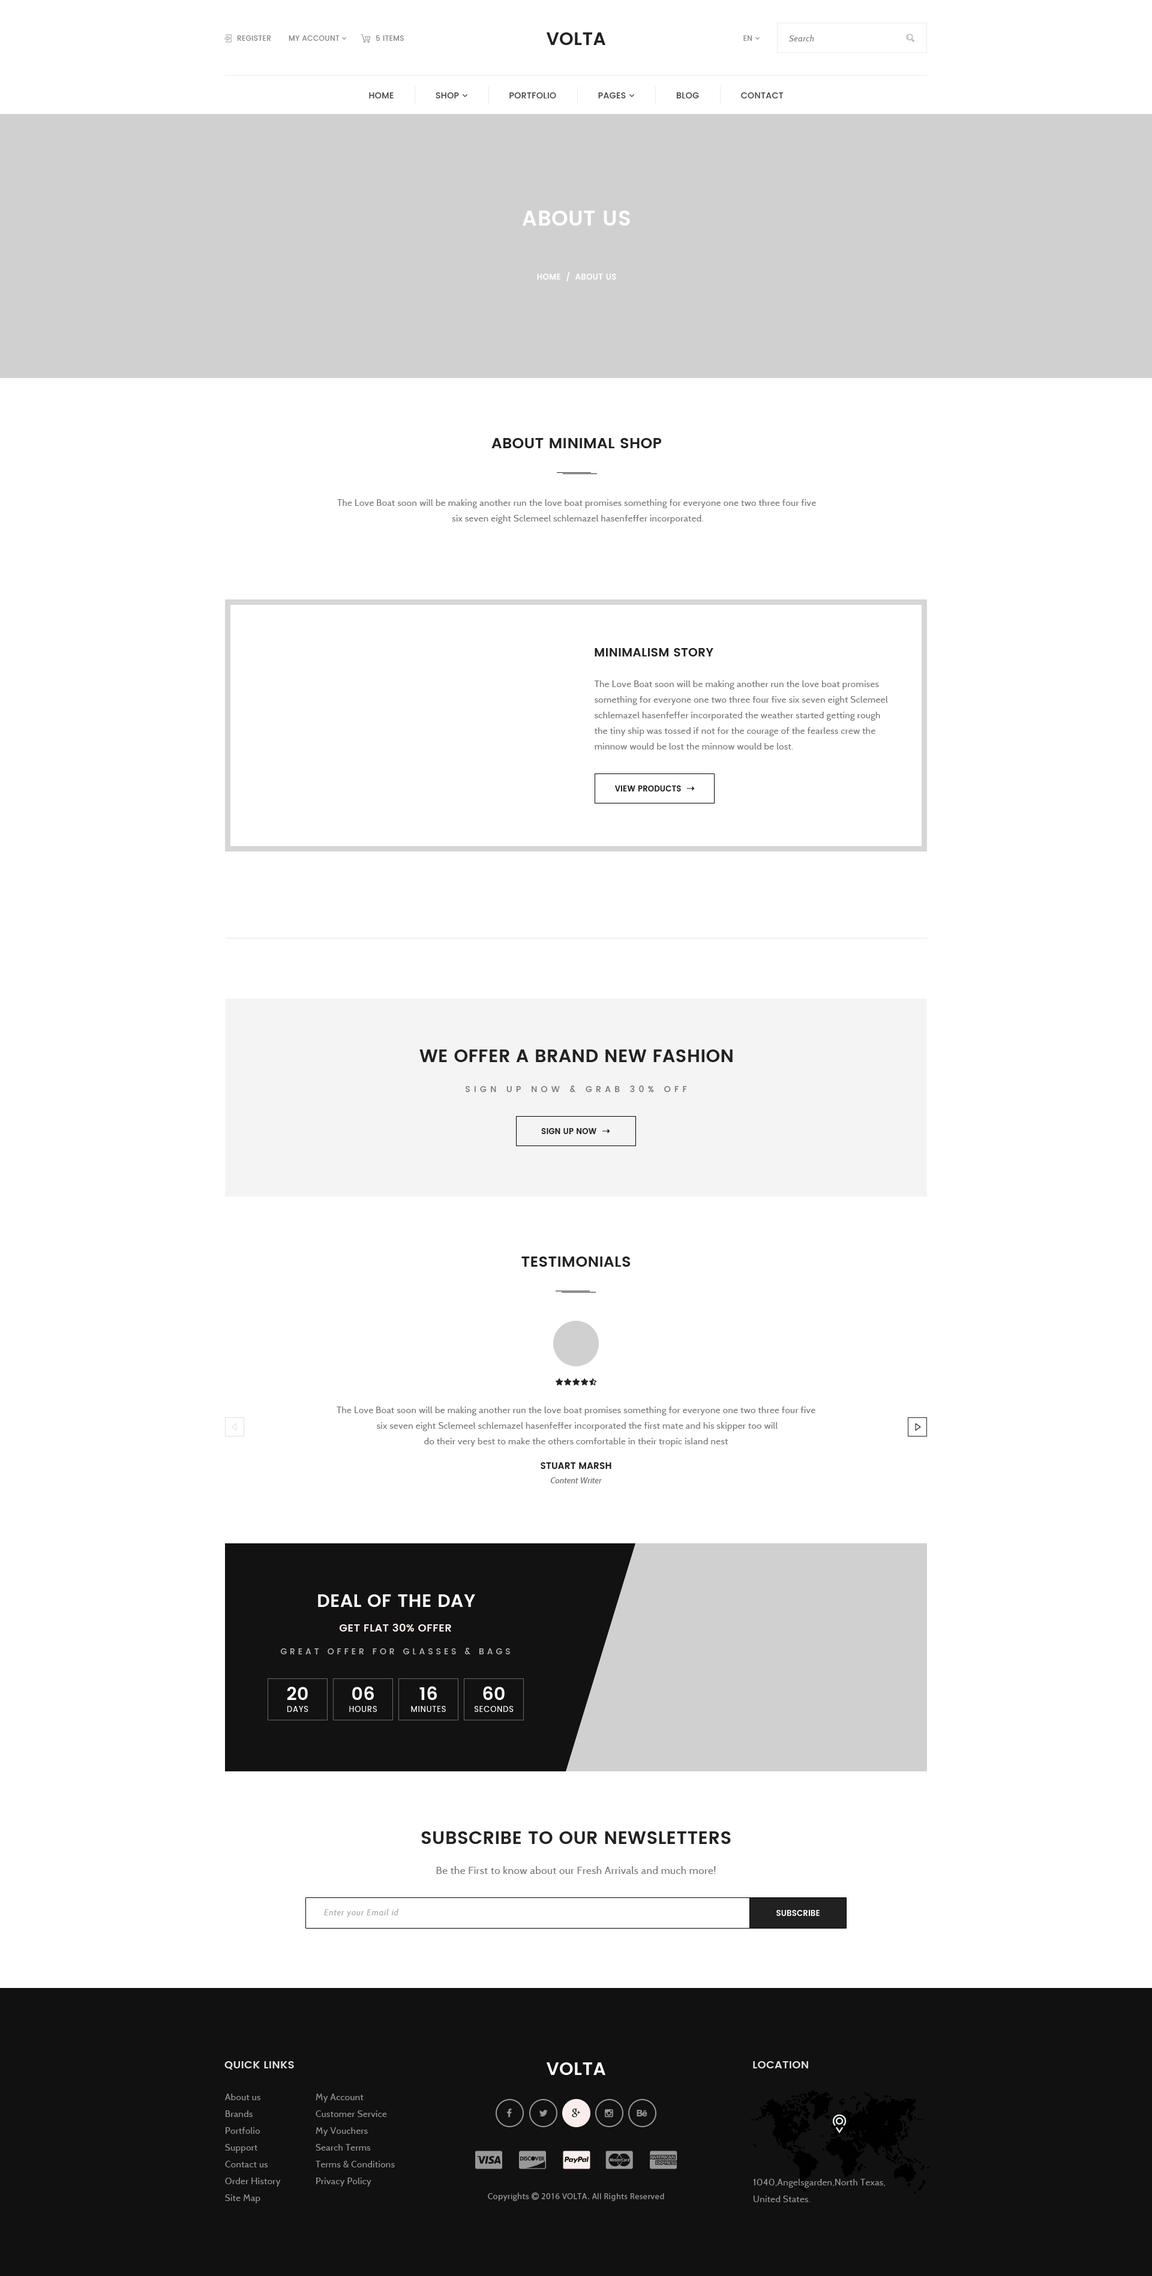
<style>
.page{position:relative;width:1152px;height:2276px;background:#ffffff}
.page>*{position:absolute;margin:0}
.t1{font:7.2px "Poppins-Medium";letter-spacing:0.03em;color:#888888}
.t2{font:18px "Poppins-SemiBold";letter-spacing:0.015em;color:#222222}
.t3{font:8.4px "Cabin-Italic";letter-spacing:0.04em;color:#888888}
.t4{font:21px "Poppins-SemiBold";letter-spacing:0.015em;color:#ffffff}
.t5{font:7.8px "Poppins-SemiBold";letter-spacing:0.03em;color:#ffffff}
.t6{font:15px "Poppins-SemiBold";letter-spacing:0.015em;color:#222222;text-transform:uppercase}
.t7{font:9px/15.6px "Cabin-Regular";letter-spacing:0.03em;color:#777777}
.t8{font:12px "Poppins-SemiBold";letter-spacing:0.015em;color:#222222;text-transform:uppercase}
.t9{font:7.8px "Poppins-SemiBold";letter-spacing:0.015em;color:#222222}
.t10{font:18px "Poppins-SemiBold";letter-spacing:0.015em;color:#222222;text-transform:uppercase}
.t11{font:8.4px "Poppins-Medium";letter-spacing:0.45em;color:#777777}
.t12{font:8.4px/14.4px "Cabin-Italic";letter-spacing:0.015em;color:#777777}
.t13{font:9px/14.4px "Poppins-SemiBold";letter-spacing:0.015em;color:#222222;text-transform:uppercase}
.t14{font:18px "Poppins-SemiBold";letter-spacing:0.015em;color:#ffffff;text-transform:uppercase}
.t15{font:10.8px "Poppins-SemiBold";letter-spacing:0.015em;color:#f9eeec;text-transform:uppercase}
.t16{font:8.4px "Poppins-Medium";letter-spacing:0.35em;color:#b6b6b6}
.t17{font:7.8px/12px "Poppins-Regular";letter-spacing:0.07em;color:#ffffff;text-transform:uppercase}
.t18{font:18px/12px "Poppins-SemiBold";letter-spacing:0.015em;color:#ffffff;text-transform:uppercase}
.t19{font:10.2px "Cabin-Regular";letter-spacing:0.03em;color:#777777}
.t20{font:8.4px "Cabin-Italic";letter-spacing:0.07em;color:#aeaeae}
.t21{font:7.8px "Poppins-SemiBold";letter-spacing:0.015em;color:#ffffff}
.t22{font:10.8px "Poppins-SemiBold";letter-spacing:0.015em;color:#e1e1e1}
.t23{font:18px "Poppins-SemiBold";letter-spacing:0.015em;color:#ffffff}
.t24{font:9px/16.8px "Cabin-Regular";letter-spacing:0.03em;color:#989898}
</style>
<div class="page">
<p class="t1" style="left:237px;top:35px;width:34px;height:6px">REGISTER</p>
<p class="t1" style="left:376px;top:35px;width:28px;height:6px">5 ITEMS</p>
<p class="t2" style="left:546px;top:32px;width:59px;height:13px">VOLTA</p>
<p class="t3" style="left:789px;top:35px;width:25px;height:6px">Search</p>
<p class="t4" style="left:522px;top:211px;width:108px;height:15px">ABOUT US</p>
<p class="t5" style="left:537px;top:272px;width:79px;height:9px">HOME  /  ABOUT US</p>
<p class="t6" style="left:491px;top:438px;width:171px;height:10px">ABOUT MINIMAL SHOP</p>
<p class="t7" style="left:337px;top:499px;width:479px;height:25px;text-align:center">The Love Boat soon will be making another run the love boat promises something for everyone one two three four five<br> six seven eight Sclemeel schlemazel hasenfeffer incorporated.</p>
<p class="t8" style="left:595px;top:648px;width:118px;height:8px">MINIMALISM STORY</p>
<p class="t7" style="left:594px;top:680px;width:294px;height:69px">The Love Boat soon will be making another run the love boat promises something for everyone one two three four five six seven eight Sclemeel schlemazel hasenfeffer incorporated the weather started getting rough the tiny ship was tossed if not for the courage of the fearless crew the minnow would be lost the minnow would be lost.</p>
<p class="t9" style="left:614px;top:785px;width:67px;height:6px">VIEW PRODUCTS</p>
<p class="t10" style="left:419px;top:1049px;width:314px;height:13px">We offer a brand new fashion</p>
<p class="t11" style="left:466px;top:1085px;width:221px;height:7px">SIGN UP NOW &amp; GRAB 30% OFF</p>
<p class="t9" style="left:541px;top:1128px;width:55px;height:6px">SIGN UP NOW</p>
<p class="t6" style="left:521px;top:1256px;width:110px;height:11px">TESTIMONIALS</p>
<p class="t7" style="left:337px;top:1406px;width:478px;height:41px;text-align:center">The Love Boat soon will be making another run the love boat promises something for everyone one two three four five<br> six seven eight Sclemeel schlemazel hasenfeffer incorporated the first mate and his skipper too will<br>do their very best to make the others comfortable in their tropic island nest</p>
<p class="t12" style="left:541px;top:1462px;width:70px;height:21px;text-align:center"><span class="t13">Stuart Marsh<br></span>Content Writer</p>
<p class="t14" style="left:318px;top:1594px;width:157px;height:13px">DEAL OF THE DAY</p>
<p class="t15" style="left:339px;top:1624px;width:112px;height:7px">GET FLAT 30% OFFER</p>
<p class="t16" style="left:280px;top:1648px;width:230px;height:6px">GREAT OFFER FOR GLASSES &amp; BAGS</p>
<p class="t17" style="left:349px;top:1686px;width:28px;height:26px;text-align:center"><span class="t18">06<br></span>HOURS</p>
<p class="t17" style="left:411px;top:1686px;width:35px;height:26px;text-align:center"><span class="t18">16<br></span>MINUTES</p>
<p class="t17" style="left:474px;top:1686px;width:40px;height:26px;text-align:center"><span class="t18">60<br></span>SECONDS</p>
<p class="t17" style="left:287px;top:1687px;width:21px;height:25px;text-align:center"><span class="t18">20<br></span>DAYS</p>
<p class="t10" style="left:421px;top:1831px;width:310px;height:13px">SUBSCRIBE to our newsletters</p>
<p class="t19" style="left:436px;top:1866px;width:280px;height:8px">Be the First to know about our Fresh Arrivals and much more!</p>
<p class="t20" style="left:324px;top:1909px;width:75px;height:8px">Enter your Email id</p>
<p class="t21" style="left:776px;top:1910px;width:44px;height:6px">SUBSCRIBE</p>
<p class="t22" style="left:224px;top:2061px;width:70px;height:8px">QUICK LINKS</p>
<p class="t23" style="left:546px;top:2062px;width:59px;height:13px">VOLTA</p>
<p class="t22" style="left:753px;top:2061px;width:55px;height:7px">LOCATION</p>
<p class="t24" style="left:225px;top:2093px;width:56px;height:110px">About us<br>Brands<br>Portfolio<br>Support<br>Contact us<br>Order History<br>Site Map</p>
<p class="t24" style="left:316px;top:2093px;width:79px;height:93px">My Account<br>Customer Service<br>My Vouchers<br>Search Terms<br>Terms &amp; Conditions<br>Privacy Policy</p>
<p class="t24" style="left:753px;top:2179px;width:132px;height:23px">1040,Angelsgarden,North Texas,<br>United States.</p>
</div>
